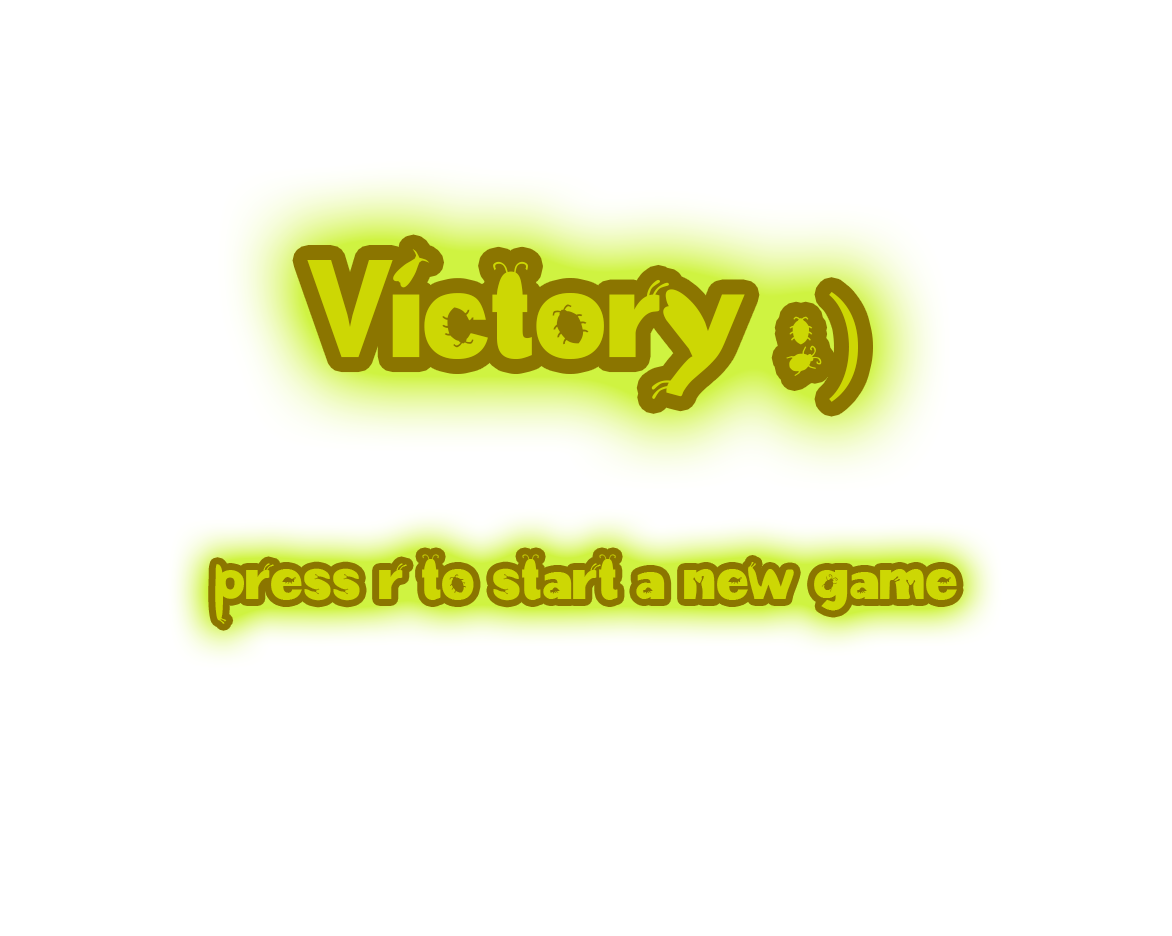
<style>
.page{position:relative;width:1172px;height:936px;background:#ffffff}
.page>*{position:absolute;margin:0}
.t1{font:125px "abug'slife-Regular";color:#cdd704}
.t2{font:125px "MinionPro-Regular";color:#cdd704}
.t3{font:58.3px "abug'slife-Regular";color:#cdd704}
</style>
<div class="page">
<p class="t1" style="left:307px;top:249px;width:551px;height:153px">Victory :<span class="t2">)</span></p>
<p class="t3" style="left:215px;top:554px;width:742px;height:70px">press r to start a new game</p>
</div>
